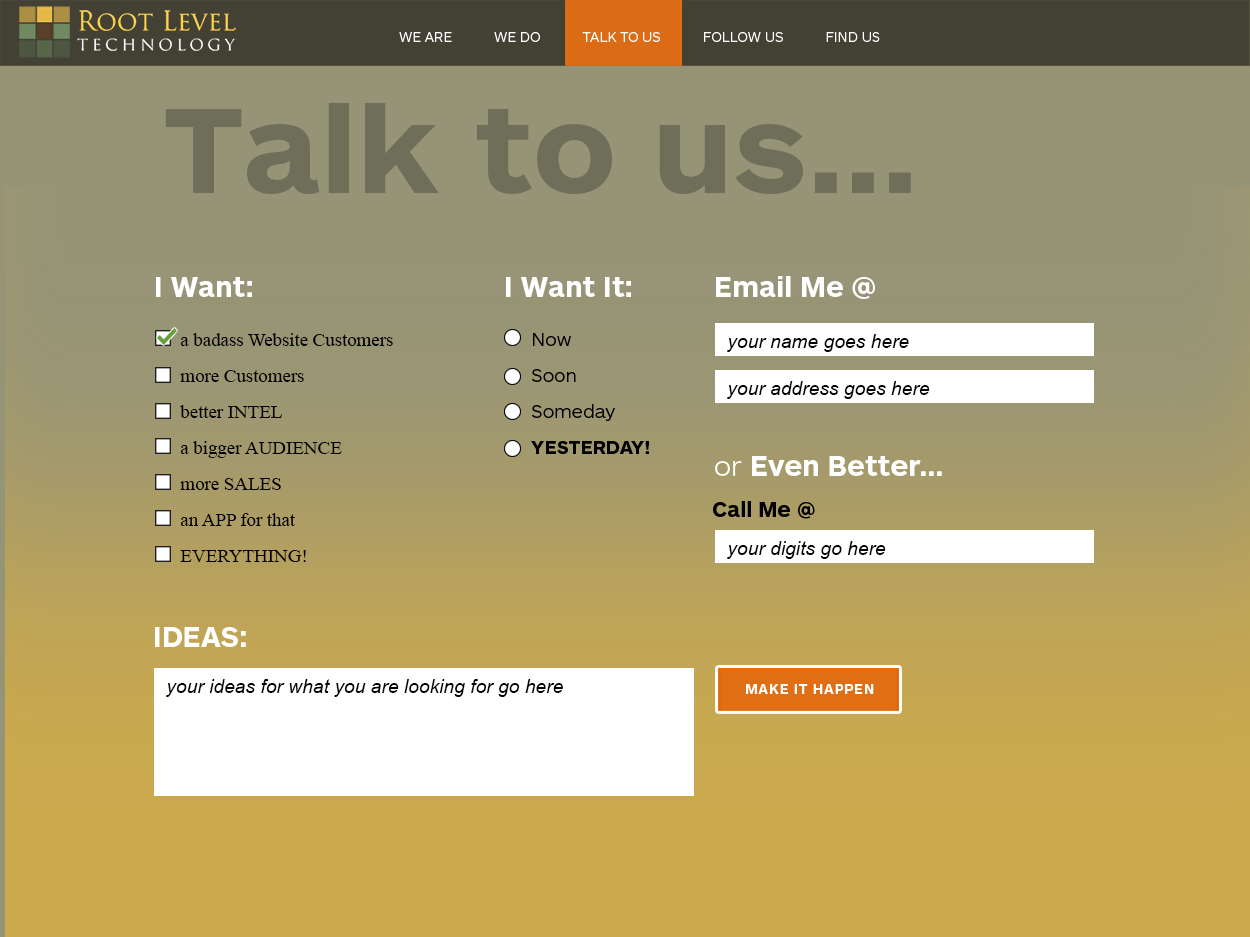
<style>
.page{position:relative;width:1250px;height:937px}
.page>*{position:absolute;margin:0}
.t1{font:14.2px "ARSMaquettePro-Light";color:#ffffff}
.t2{font:126.6px "ARSMaquettePro-Bold";color:#6f6e58;scale:1.04 1}
.t3{font:29px "ARSMaquettePro-Bold";color:#ffffff}
.t4{font:19.3px/36px "TimesNewRomanPSMT";letter-spacing:-0.01em;color:#000000}
.t5{font:19.3px/36px "ARSMaquettePro-Light";color:#000000}
.t6{font:19.3px/36px "ARSMaquettePro-Bold";color:#000000}
.t7{font:19.3px "Arial-ItalicMT";color:#000000}
.t8{font:29px "ARSMaquettePro-Light";color:#ffffff}
.t9{font:21.7px "ARSMaquettePro-Bold";color:#000000}
.t10{font:14.2px "ARSMaquettePro-Bold";letter-spacing:0.05em;color:#ffffff}
</style>
<div class="page">
<p class="t1" style="left:399px;top:32px;width:481px;height:10px">WE ARE           WE DO           TALK TO US           FOLLOW US           FIND US</p>
<p class="t2" style="left:165px;top:103px;width:746px;height:91px">Talk to us...</p>
<p class="t3" style="left:156px;top:277px;width:96px;height:20px">I Want:</p>
<p class="t3" style="left:506px;top:277px;width:125px;height:20px">I Want It:</p>
<p class="t3" style="left:716px;top:276px;width:159px;height:23px">Email Me @</p>
<p class="t4" style="left:180px;top:333px;width:213px;height:229px">a badass Website Customers<br>more Customers<br>better INTEL<br>a bigger AUDIENCE<br>more SALES<br>an APP for that<br>EVERYTHING!</p>
<p class="t5" style="left:531px;top:333px;width:118px;height:121px">Now<br>Soon <br>Someday<br><span class="t6">YESTERDAY!</span></p>
<p class="t7" style="left:727px;top:334px;width:182px;height:18px">your name goes here</p>
<p class="t7" style="left:727px;top:381px;width:203px;height:18px">your address goes here</p>
<p class="t3" style="left:715px;top:456px;width:227px;height:20px"><span class="t8">or</span> Even Better...</p>
<p class="t9" style="left:713px;top:501px;width:102px;height:18px">Call Me @</p>
<p class="t7" style="left:727px;top:541px;width:159px;height:18px">your digits go here</p>
<p class="t3" style="left:155px;top:627px;width:91px;height:20px">IDEAS:</p>
<p class="t7" style="left:166px;top:679px;width:397px;height:18px">your ideas for what you are looking for go here</p>
<p class="t10" style="left:746px;top:684px;width:128px;height:10px">MAKE IT HAPPEN</p>
</div>
